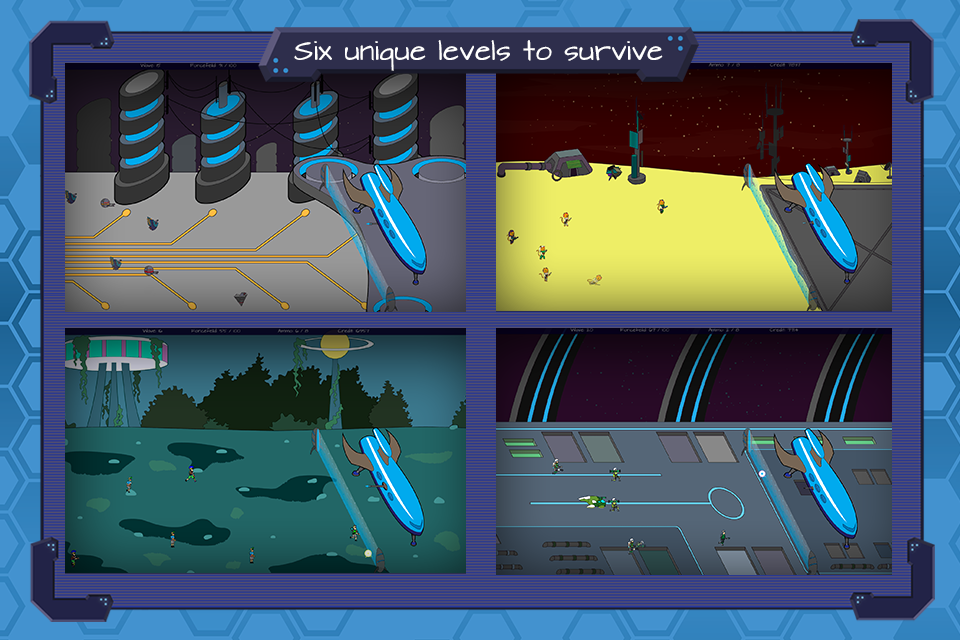
<style>
.page{position:relative;width:960px;height:640px}
.page>*{position:absolute;margin:0}
.t1{font:24.1px "ArchitectsDaughter";color:#ffffff}
</style>
<div class="page">
<p class="t1" style="left:294px;top:40px;width:369px;height:31px">Six unique levels to survive</p>
</div>
